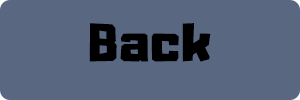
<style>
.page{position:relative;width:300px;height:100px;background:#596781}
.page>*{position:absolute;margin:0}
.t1{font:48px "Adumu";letter-spacing:0.04em;color:#000000}
</style>
<div class="page">
<p class="t1" style="left:89px;top:23px;width:122px;height:39px">Back</p>
</div>
